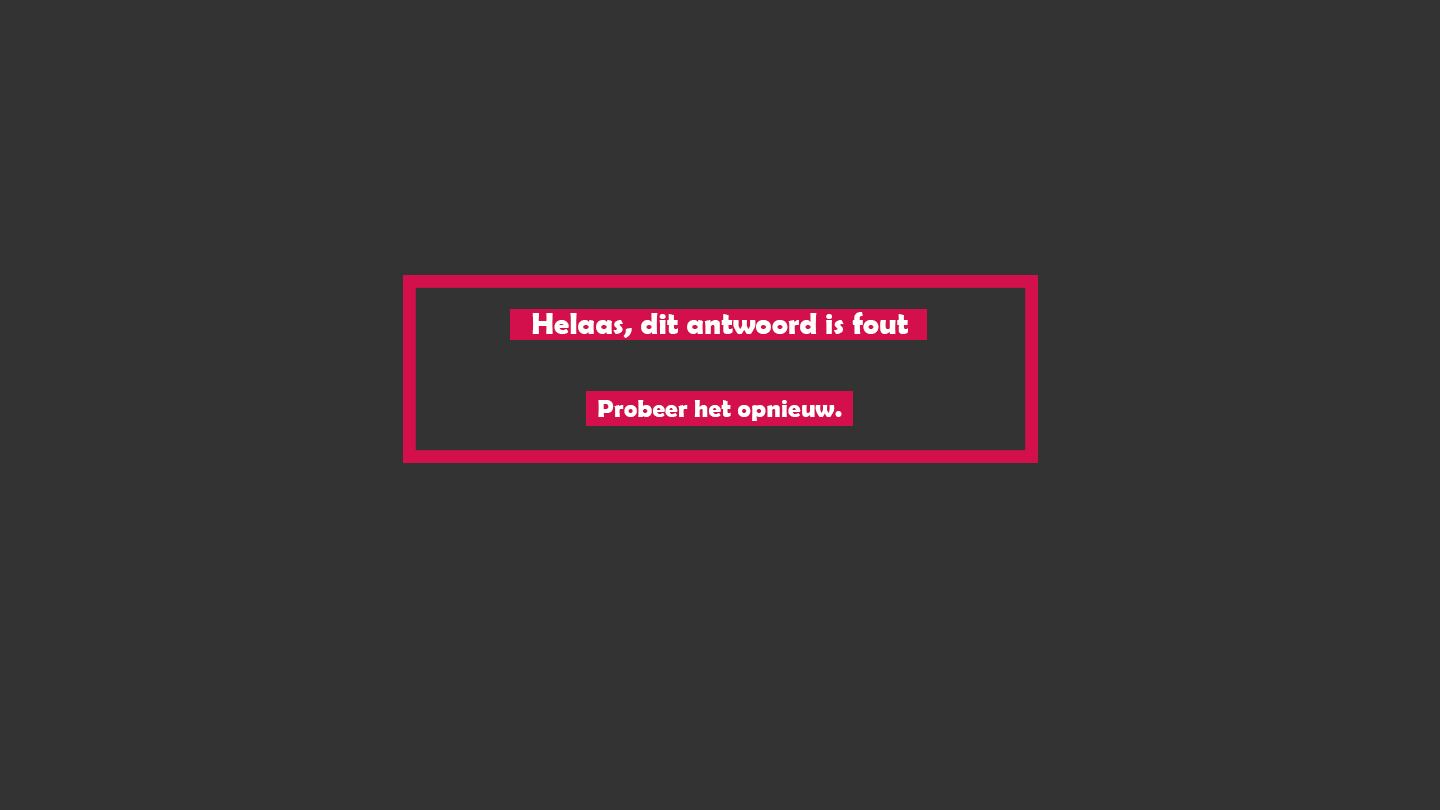
<style>
.page{position:relative;width:1440px;height:810px;background:#333333}
.page>*{position:absolute;margin:0}
.t1{font:29.8px "BerlinSansFBDemi-Bold";letter-spacing:0.01em;color:#ffffff}
.t2{font:25px "BerlinSansFBDemi-Bold";letter-spacing:0.01em;color:#ffffff}
</style>
<div class="page">
<p class="t1" style="left:532px;top:312px;width:376px;height:26px">Helaas, dit antwoord is fout</p>
<p class="t2" style="left:598px;top:400px;width:244px;height:21px">Probeer het opnieuw.</p>
</div>
